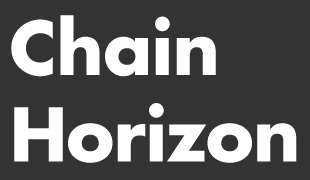
<style>
.page{position:relative;width:310px;height:180px;background:#333333}
.page>*{position:absolute;margin:0}
.t1{font:72px "Futura-Bold";letter-spacing:-0.01em;color:#ffffff}
</style>
<div class="page">
<p class="t1" style="left:11px;top:15px;width:286px;height:148px">Chain<br>Horizon</p>
</div>
